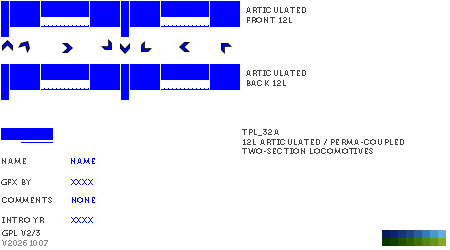
<style>
.page{position:relative;width:450px;height:250px;background:#ffffff}
.page>*{position:absolute;margin:0}
.t1{font:8px "Museo700-Regular";letter-spacing:0.075em;color:#404040;text-transform:uppercase}
.t2{font:8px "Museo700-Regular";letter-spacing:0.075em;color:#0000ff;text-transform:uppercase}
.t3{font:8px "Museo700-Regular";letter-spacing:0.075em;color:#848484;text-transform:uppercase}
</style>
<div class="page">
<p class="t1" style="left:246px;top:7px;width:60px;height:16px">articulated <br>front 12l</p>
<p class="t1" style="left:246px;top:70px;width:60px;height:16px">articulated <br>back 12l</p>
<p class="t1" style="left:242px;top:129px;width:162px;height:25px">tpl_32A<br>12L Articulated / perma-Coupled <br>Two-Section Locomotives</p>
<p class="t1" style="left:2px;top:158px;width:24px;height:6px">name</p>
<p class="t2" style="left:71px;top:158px;width:24px;height:6px">name</p>
<p class="t1" style="left:1px;top:179px;width:30px;height:6px">gfx by</p>
<p class="t2" style="left:71px;top:179px;width:22px;height:6px">xxxx</p>
<p class="t1" style="left:2px;top:197px;width:50px;height:6px">comments</p>
<p class="t2" style="left:72px;top:197px;width:23px;height:6px">none</p>
<p class="t1" style="left:2px;top:217px;width:42px;height:6px">intro yr</p>
<p class="t2" style="left:71px;top:217px;width:22px;height:6px">xxxx</p>
<p class="t1" style="left:2px;top:230px;width:38px;height:6px">gpl v2/3</p>
<p class="t3" style="left:2px;top:240px;width:46px;height:6px">v20261007</p>
</div>
